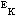
<style>
.page{position:relative;width:16px;height:16px;background:#ffffff}
.page>*{position:absolute;margin:0}
.t1{font:10px "BookmanOldStyle";color:#000000}
</style>
<div class="page">
<p class="t1" style="left:1px;top:1px;width:6px;height:7px">E</p>
<p class="t1" style="left:8px;top:8px;width:7px;height:7px">K</p>
</div>
